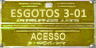
<style>
.page{position:relative;width:96px;height:48px}
.page>*{position:absolute;margin:0}
.t1{font:12px "Calibri-Bold";letter-spacing:0.04em;color:#e9e690}
.t2{font:10px "Arial-BoldMT";letter-spacing:0.03em;color:#e9e690;scale:0.8 1}
</style>
<div class="page">
<p class="t1" style="left:11px;top:9px;width:76px;height:9px">ESGOTOS 3-01</p>
<p class="t2" style="left:30px;top:32px;width:36px;height:8px">ACESSO</p>
</div>
